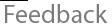
<style>
.page{position:relative;width:112px;height:28px;background:#ffffff}
.page>*{position:absolute;margin:0}
.t1{font:26px "MyriadPro-Regular";color:#7b7b7b}
</style>
<div class="page">
<p class="t1" style="left:5px;top:4px;width:103px;height:19px">Feedback</p>
</div>
